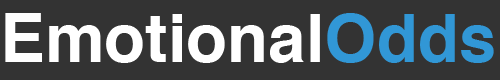
<style>
.page{position:relative;width:500px;height:80px;background:#333333}
.page>*{position:absolute;margin:0}
.t1{font:67.1px "Helvetica-Bold";color:#ffffff}
.t2{font:67.1px "Helvetica-Bold";color:#3197d6}
</style>
<div class="page">
<p class="t1" style="left:5px;top:13px;width:489px;height:50px">Emotional<span class="t2">Odds</span></p>
</div>
